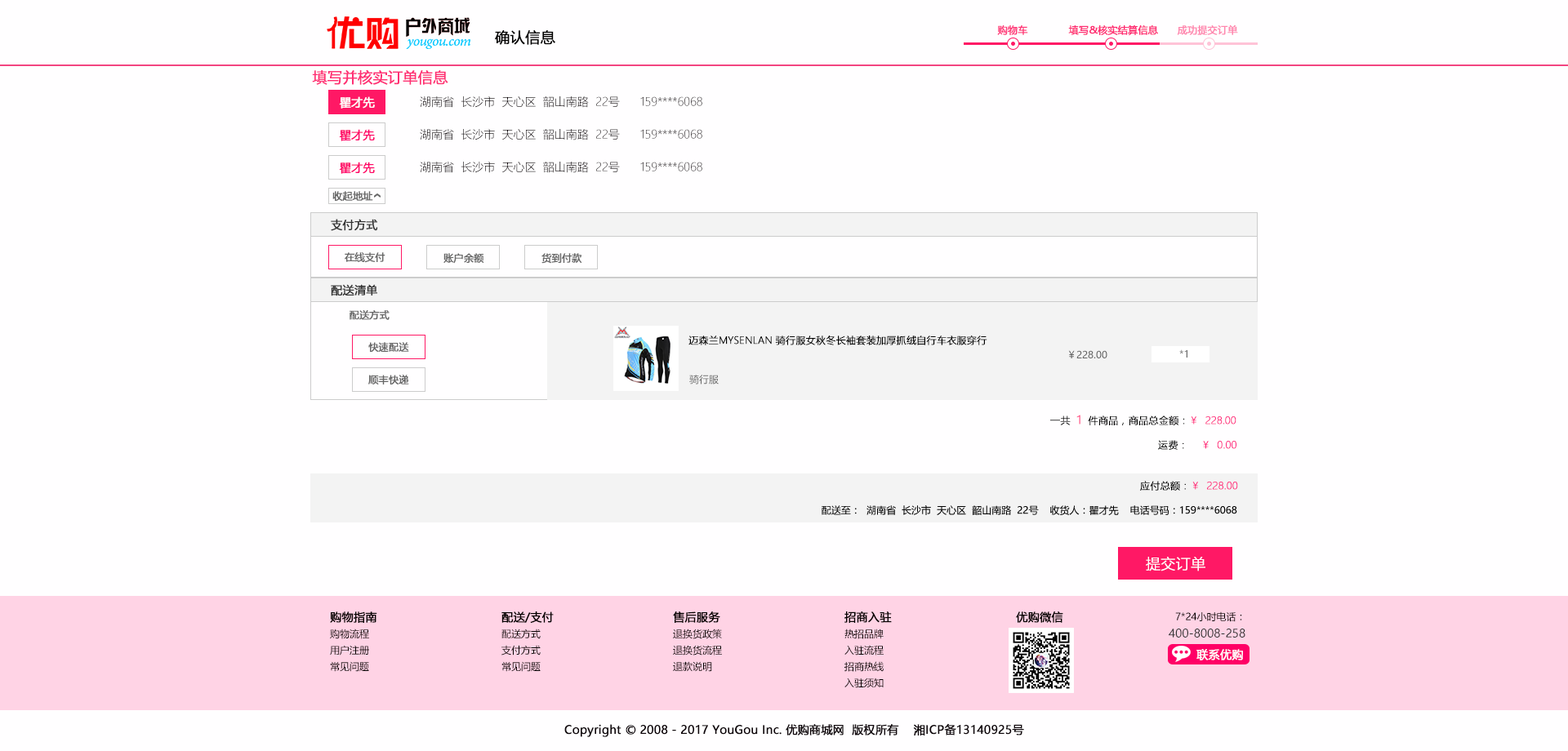
<style>
.page{position:relative;width:1568px;height:751px;background:#fffeff}
.page>*{position:absolute;margin:0}
.t1{font:9.8px "MicrosoftYaHei";color:#ff3679;font-weight:bold}
.t2{font:9.8px "MicrosoftYaHei";color:#ff2b72;font-weight:bold}
.t3{font:9.8px "MicrosoftYaHei";color:#ff86ae;font-weight:bold}
.t4{font:14.7px "MicrosoftYaHei";color:#010000;font-weight:bold}
.t5{font:14.7px "MicrosoftYaHei";color:#ff2f74;font-weight:bold}
.t6{font:11.4px "MicrosoftYaHei";color:#ffffff;font-weight:bold}
.t7{font:11.4px "MicrosoftYaHeiLight";color:#0e050a}
.t8{font:11.4px "MicrosoftYaHeiLight"}
.t9{font:11.4px "MicrosoftYaHei";color:#ff0066;font-weight:bold}
.t10{font:9.8px "MicrosoftYaHei";color:#666666;font-weight:bold}
.t11{font:11.4px "MicrosoftYaHei";color:#333333;font-weight:bold}
.t12{font:9.8px "MicrosoftYaHeiLight";color:#000000;font-weight:bold}
.t13{font:9.8px "MicrosoftYaHei";color:#666666}
.t14{font:11.4px "MicrosoftYaHeiLight";color:#ff4180;font-weight:bold}
.t15{font:9.8px "MicrosoftYaHeiLight";color:#ff217a;font-weight:bold}
.t16{font:9.8px "MicrosoftYaHeiLight";font-weight:bold}
.t17{font:14.7px "MicrosoftYaHeiLight";color:#fffeff;font-weight:bold}
.t18{font:11.4px "MicrosoftYaHei";color:#040000;font-weight:bold}
.t19{font:9.8px "MicrosoftYaHei";color:#040000}
.t20{font:11.4px "MicrosoftYaHei";color:#323333}
.t21{font:11.4px "MicrosoftYaHei";color:#0e050a;font-weight:bold}
</style>
<div class="page">
<p class="t1" style="left:997px;top:25px;width:31px;height:10px">购物车</p>
<p class="t2" style="left:1068px;top:25px;width:90px;height:10px">填写&amp;核实结算信息</p>
<p class="t3" style="left:1177px;top:24px;width:61px;height:11px">成功提交订单</p>
<p class="t4" style="left:495px;top:30px;width:60px;height:15px">确认信息</p>
<p class="t5" style="left:312px;top:69px;width:136px;height:16px">填写并核实订单信息</p>
<p class="t6" style="left:339px;top:96px;width:36px;height:13px">瞿才先</p>
<p class="t7" style="left:420px;top:96px;width:200px;height:12px">湖南省  长沙市  天心区  韶山南路  22号</p>
<p class="t8" style="left:640px;top:96px;width:62px;height:10px">159****6068</p>
<p class="t9" style="left:339px;top:129px;width:36px;height:12px">瞿才先</p>
<p class="t7" style="left:420px;top:129px;width:200px;height:11px">湖南省  长沙市  天心区  韶山南路  22号</p>
<p class="t8" style="left:640px;top:129px;width:62px;height:10px">159****6068</p>
<p class="t9" style="left:339px;top:162px;width:36px;height:12px">瞿才先</p>
<p class="t7" style="left:420px;top:162px;width:200px;height:11px">湖南省  长沙市  天心区  韶山南路  22号</p>
<p class="t8" style="left:640px;top:162px;width:62px;height:10px">159****6068</p>
<p class="t10" style="left:332px;top:191px;width:41px;height:10px">收起地址</p>
<p class="t11" style="left:331px;top:219px;width:47px;height:12px">支付方式</p>
<p class="t10" style="left:345px;top:252px;width:40px;height:11px">在线支付</p>
<p class="t10" style="left:443px;top:253px;width:41px;height:11px">账户余额</p>
<p class="t10" style="left:541px;top:253px;width:41px;height:11px">货到付款</p>
<p class="t11" style="left:331px;top:284px;width:46px;height:12px">配送清单</p>
<p class="t10" style="left:350px;top:310px;width:40px;height:10px">配送方式</p>
<p class="t12" style="left:688px;top:336px;width:299px;height:9px">迈森兰MYSENLAN 骑行服女秋冬长袖套装加厚抓绒自行车衣服穿行</p>
<p class="t10" style="left:368px;top:342px;width:41px;height:10px">快速配送</p>
<p class="t13" style="left:1068px;top:350px;width:39px;height:9px">￥228.00</p>
<p class="t13" style="left:1179px;top:350px;width:8px;height:8px">*1</p>
<p class="t10" style="left:368px;top:375px;width:41px;height:10px">顺丰快递</p>
<p class="t13" style="left:689px;top:375px;width:30px;height:10px">骑行服</p>
<p class="t12" style="left:1050px;top:415px;width:186px;height:10px">一共  <span class="t14">1 </span> 件商品，商品总金额：<span class="t15">￥  228.00</span></p>
<p class="t16" style="left:1158px;top:440px;width:78px;height:10px">运费：    ￥  0.00</p>
<p class="t15" style="left:1140px;top:481px;width:98px;height:10px"><span class="t12">应付总额：</span>￥  228.00</p>
<p class="t17" style="left:1146px;top:557px;width:59px;height:15px">提交订单</p>
<p class="t18" style="left:330px;top:612px;width:47px;height:11px">购物指南</p>
<p class="t18" style="left:501px;top:612px;width:53px;height:11px">配送/支付</p>
<p class="t18" style="left:673px;top:612px;width:47px;height:11px">售后服务</p>
<p class="t18" style="left:844px;top:612px;width:48px;height:11px">招商入驻</p>
<p class="t18" style="left:1016px;top:612px;width:47px;height:11px">优购微信</p>
<p class="t19" style="left:1175px;top:612px;width:67px;height:10px">7*24小时电话：</p>
<p class="t19" style="left:330px;top:629px;width:39px;height:10px">购物流程</p>
<p class="t19" style="left:501px;top:629px;width:40px;height:10px">配送方式</p>
<p class="t19" style="left:673px;top:629px;width:49px;height:10px">退换货政策</p>
<p class="t19" style="left:844px;top:629px;width:40px;height:10px">热招品牌</p>
<p class="t20" style="left:1169px;top:629px;width:76px;height:9px">400-8008-258</p>
<p class="t19" style="left:330px;top:645px;width:39px;height:11px">用户注册</p>
<p class="t19" style="left:501px;top:645px;width:40px;height:11px">支付方式</p>
<p class="t19" style="left:673px;top:645px;width:49px;height:11px">退换货流程</p>
<p class="t19" style="left:844px;top:645px;width:40px;height:11px">入驻流程</p>
<p class="t6" style="left:1196px;top:649px;width:47px;height:12px">联系优购</p>
<p class="t19" style="left:330px;top:662px;width:39px;height:10px">常见问题</p>
<p class="t19" style="left:501px;top:662px;width:40px;height:10px">常见问题</p>
<p class="t19" style="left:673px;top:662px;width:39px;height:10px">退款说明</p>
<p class="t19" style="left:844px;top:662px;width:40px;height:10px">招商热线</p>
<p class="t19" style="left:844px;top:678px;width:40px;height:10px">入驻须知</p>
<p class="t21" style="left:564px;top:724px;width:460px;height:13px">Copyright © 2008 - 2017 YouGou Inc. 优购商城网  版权所有    湘ICP备13140925号</p>
</div>
